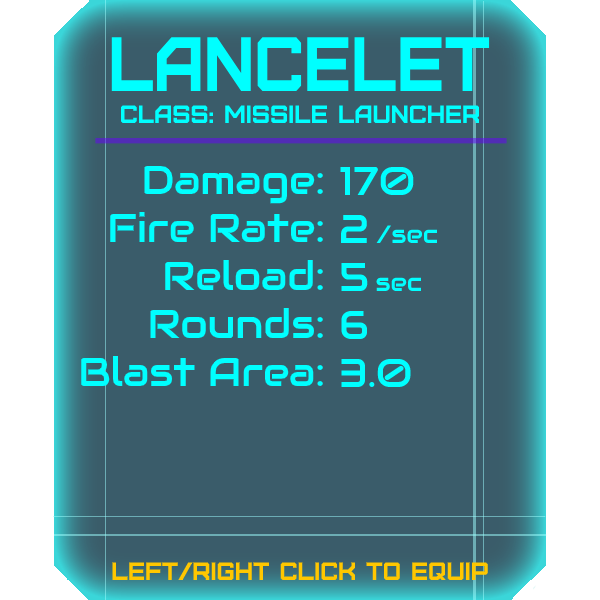
<style>
.page{position:relative;width:600px;height:600px;background:#3a5c6a}
.page>*{position:absolute;margin:0}
.t1{font:76.8px "Furore";color:#00ffff;scale:0.9 1}
.t2{font:25px "Furore";color:#00ffff}
.t3{font:40px "Audiowide-Regular";color:#00ffff}
.t4{font:25px "Audiowide-Regular";color:#00ffff}
.t5{font:25px "Furore";color:#ffc700}
</style>
<div class="page">
<p class="t1" style="left:111px;top:37px;width:379px;height:54px">lancelet</p>
<p class="t2" style="left:120px;top:105px;width:360px;height:18px">Class: missile launcher</p>
<p class="t3" style="left:81px;top:165px;width:242px;height:221px;text-align:right">Damage:<br>Fire Rate:<br>Reload:<br>Rounds:<br>Blast Area:</p>
<p class="t3" style="left:340px;top:166px;width:98px;height:221px">170<br>2 <span class="t4">/sec<br></span>5 <span class="t4">sec<br></span>6<br>3.0</p>
<p class="t5" style="left:112px;top:562px;width:376px;height:18px">left/right click to equip</p>
</div>
